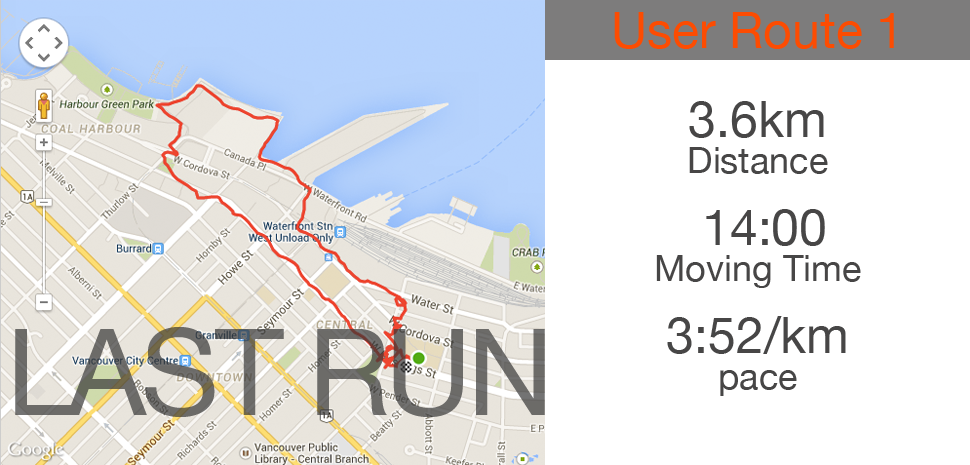
<style>
.page{position:relative;width:970px;height:465px;background:#ffffff}
.page>*{position:absolute;margin:0}
.t1{font:50px "HelveticaNeue";color:#fc4c02}
.t2{font:36px/36px "HelveticaNeue";color:#474646}
.t3{font:50px/36px "HelveticaNeue";color:#474646}
.t4{font:120px "HelveticaNeue";letter-spacing:-0.038em;color:#6c6b68}
</style>
<div class="page">
<p class="t1" style="left:614px;top:12px;width:280px;height:37px">User Route 1</p>
<p class="t2" style="left:656px;top:101px;width:205px;height:295px;text-align:center"><span class="t3">3.6km<br></span>Distance<br><br><span class="t3"> 14:00<br></span>Moving Time<br><br><span class="t3">3:52/km<br></span>pace</p>
<p class="t4" style="left:15px;top:327px;width:530px;height:90px">LAST RUN</p>
</div>
